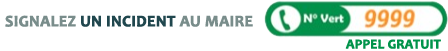
<style>
.page{position:relative;width:448px;height:51px;background:#ffffff}
.page>*{position:absolute;margin:0}
.t1{font:16px "Candara-Bold";color:#20474e;font-weight:bold}
.t2{font:16px "Candara-Bold";color:#798d8b;font-weight:bold}
.t3{font:13.3px "Candara-Bold";color:#00934a;font-weight:bold}
</style>
<div class="page">
<p class="t1" style="left:5px;top:15px;width:248px;height:12px"><span class="t2">SIGNALEZ</span> UN INCIDENT <span class="t2">AU MAIRE</span></p>
<p class="t3" style="left:345px;top:39px;width:96px;height:10px">APPEL GRATUIT</p>
</div>
